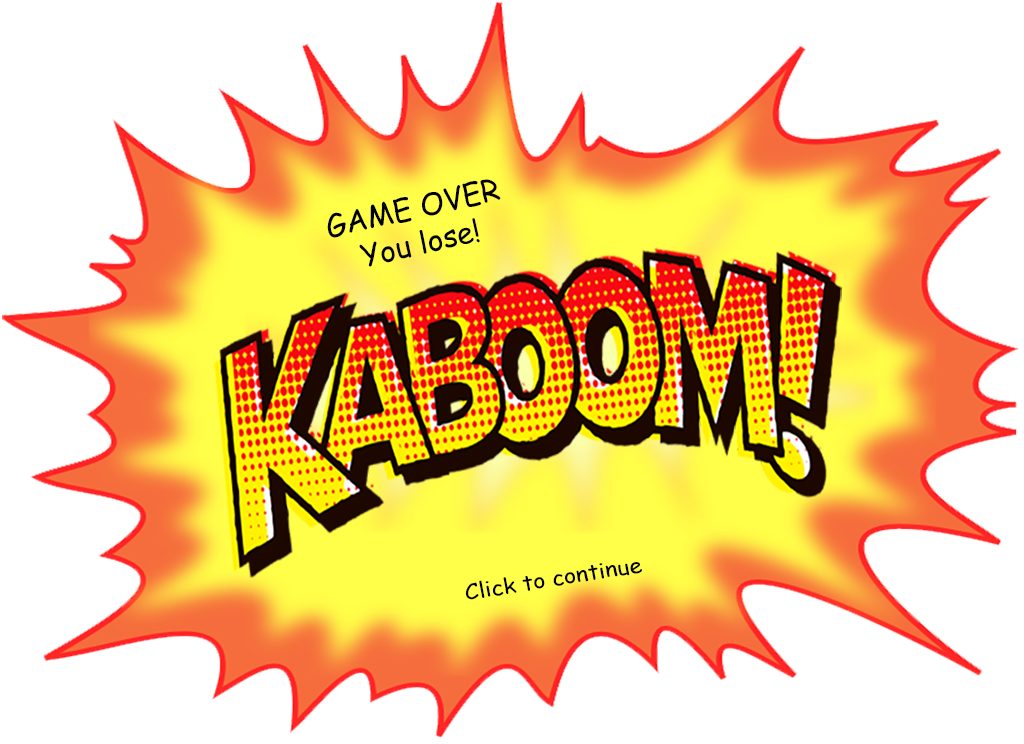
<style>
.page{position:relative;width:1024px;height:744px;background:#ffffff}
.page>*{position:absolute;margin:0}
.t1{font:30px "ComicSansMS";color:#000000}
.t2{font:21.5px "ComicSansMS";color:#000000;scale:1.08 1}
</style>
<div class="page">
<p class="t1" style="left:327px;top:179px;width:174px;height:88px;text-align:center;rotate:-13deg">GAME OVER<br>You lose!</p>
<p class="t2" style="left:466px;top:562px;width:176px;height:38px;rotate:-9deg">Click to continue</p>
</div>
